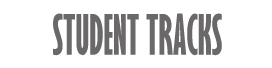
<style>
.page{position:relative;width:272px;height:68px;background:#ffffff}
.page>*{position:absolute;margin:0}
.t1{font:51.1px "GillSansMT-ExtraCondensedBold";color:#6a6868;scale:0.85 1}
</style>
<div class="page">
<p class="t1" style="left:53px;top:13px;width:169px;height:43px">STUDENT TRACKS</p>
</div>
